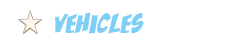
<style>
.page{position:relative;width:250px;height:45px;background:#ffffff}
.page>*{position:absolute;margin:0}
.t1{font:30px "HoustonComicsPersonalUse";color:#7ecef6}
</style>
<div class="page">
<p class="t1" style="left:55px;top:12px;width:89px;height:22px">VEHICLES</p>
</div>
